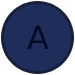
<style>
.page{position:relative;width:75px;height:75px;background:#1f2d5b}
.page>*{position:absolute;margin:0}
.t1{font:32px "DejaVuSans";color:#040c25}
</style>
<div class="page">
<p class="t1" style="left:27px;top:25px;width:22px;height:24px">A</p>
</div>
